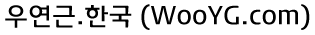
<style>
.page{position:relative;width:315px;height:35px;background:#ffffff}
.page>*{position:absolute;margin:0}
.t1{font:24px "Daum_Regular";color:#000000}
</style>
<div class="page">
<p class="t1" style="left:5px;top:4px;width:305px;height:26px">우연근.한국 (WooYG.com)</p>
</div>
